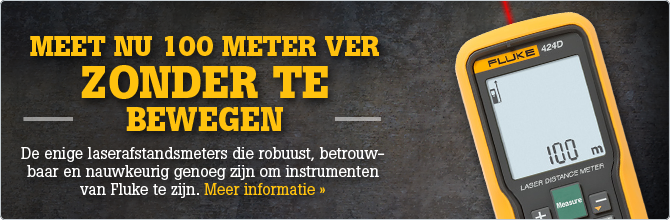
<style>
.page{position:relative;width:670px;height:220px}
.page>*{position:absolute;margin:0}
.t1{font:28px/44.8px "BotonPro-Bold";color:#ffc20e;text-transform:uppercase}
.t2{font:45px/42px "BotonPro-Bold";color:#ffc20e;text-transform:uppercase}
.t3{font:33px/33px "BotonPro-Bold";color:#ffc20e;text-transform:uppercase}
.t4{font:16px/18px "BotonPro-Regular";color:#ffffff}
.t5{font:16px/18px "BotonPro-Regular";color:#ffc20e}
</style>
<div class="page">
<p class="t1" style="left:30px;top:36px;width:349px;height:95px;text-align:center">Meet nu 100 meter ver <span class="t2">zonder te <br></span><span class="t3">bewegen</span></p>
<p class="t4" style="left:21px;top:147px;width:364px;height:51px;text-align:center">De enige laserafstandsmeters die robuust, betrouwbaar en nauwkeurig genoeg zijn om instrumenten van Fluke te zijn. <span class="t5">Meer informatie »</span></p>
</div>
